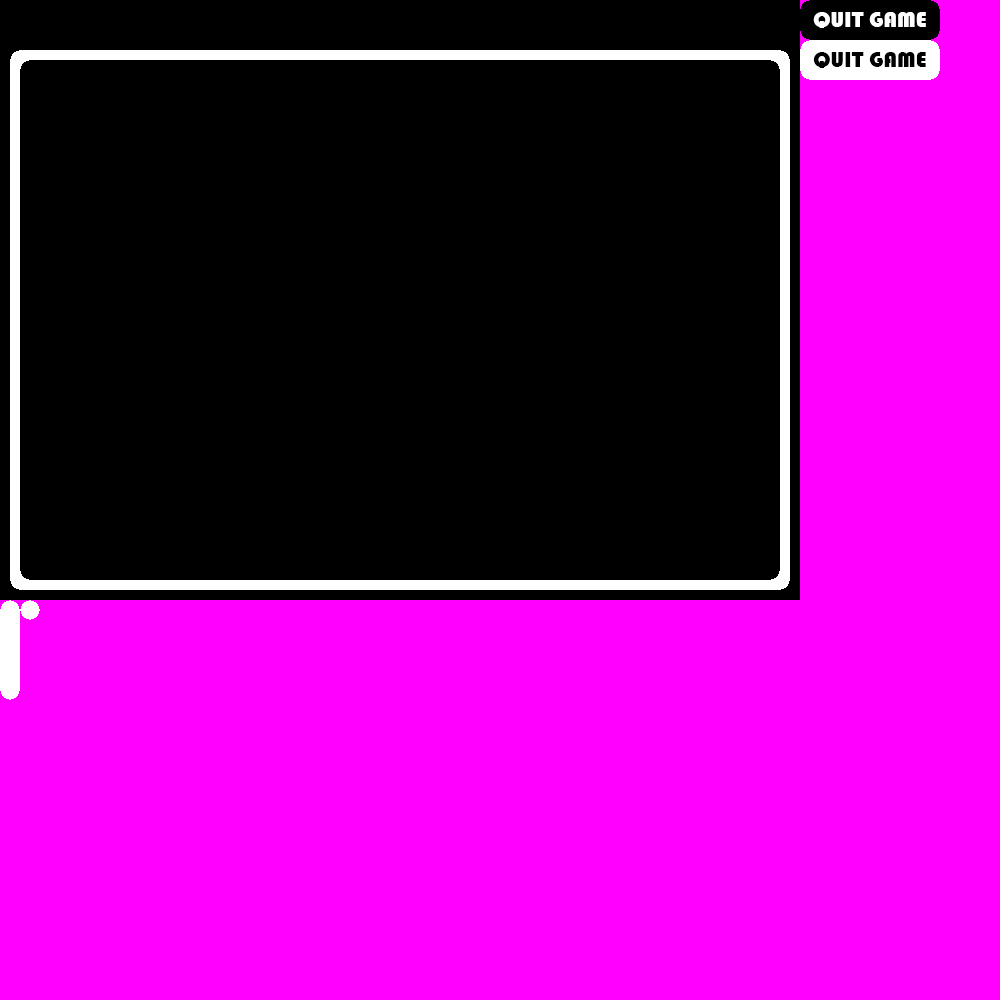
<style>
.page{position:relative;width:1000px;height:1000px;background:#ff00ff}
.page>*{position:absolute;margin:0}
.t1{font:23px "Bauhaus93";color:#ffffff}
.t2{font:23px "Bauhaus93";color:#000000}
</style>
<div class="page">
<p class="t1" style="left:813px;top:12px;width:113px;height:16px">QUIT GAME</p>
<p class="t2" style="left:813px;top:52px;width:113px;height:16px">QUIT GAME</p>
</div>
